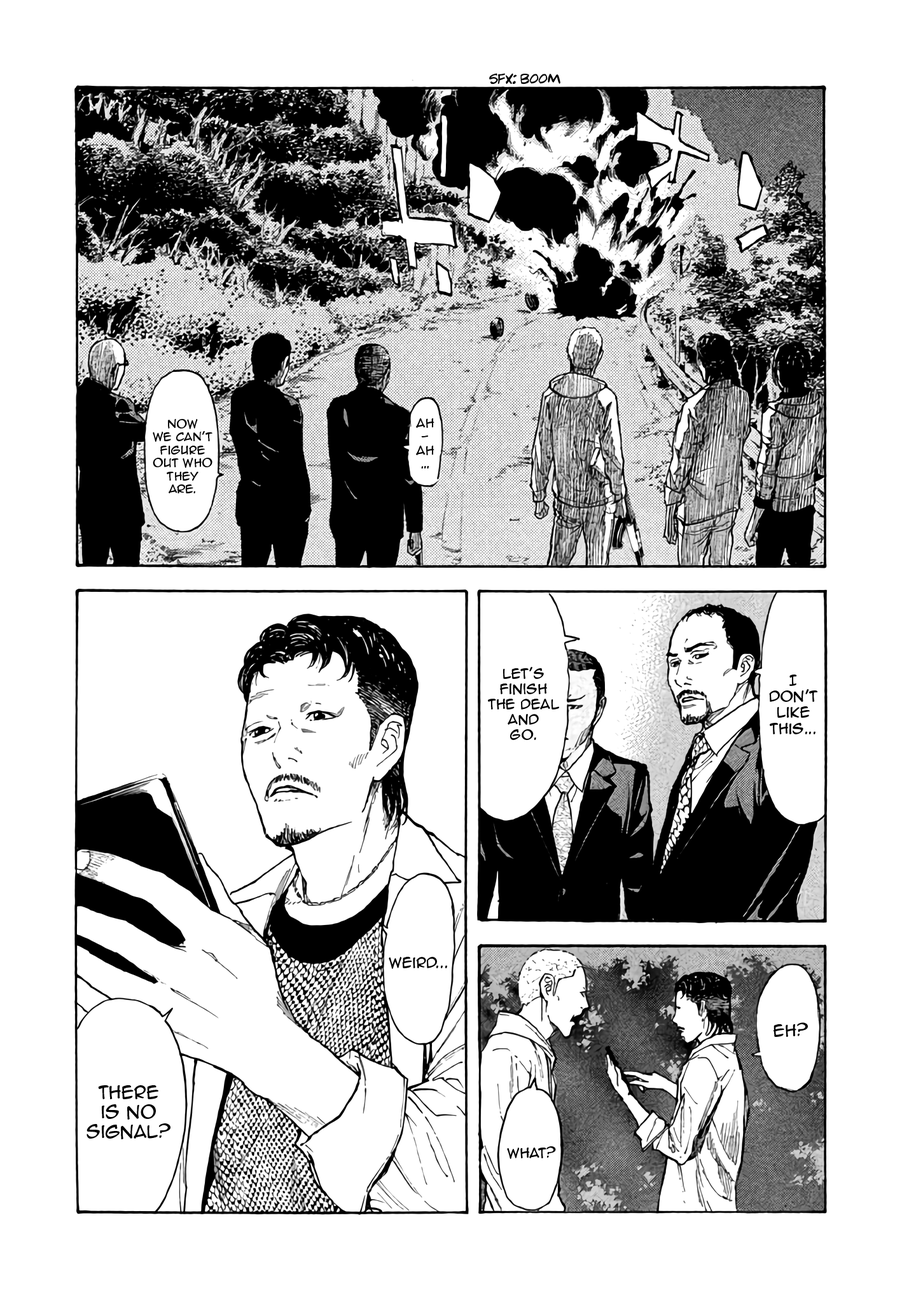
<style>
.page{position:relative;width:916px;height:1302px;background:#ffffff}
.page>*{position:absolute;margin:0}
.t1{font:13.4px "AdamWarrenpro";color:#000000}
.t2{font:10.8px "AnimeAce2.0BB";color:#000000}
.t3{font:11.4px "AnimeAce2.0BB";color:#000000}
.t4{font:12.7px "AnimeAce2.0BB";color:#000000}
.t5{font:13.4px "AnimeAce2.0BB";color:#000000}
.t6{font:15.3px "AnimeAce2.0BB";color:#000000}
.t7{font:16.5px "AnimeAce2.0BB";color:#000000}
</style>
<div class="page">
<p class="t1" style="left:489px;top:73px;width:71px;height:12px">Sfx: boom</p>
<p class="t2" style="left:153px;top:419px;width:59px;height:74px;text-align:center">Now<br>we can’t<br>figure<br>out who<br>they<br>are.</p>
<p class="t3" style="left:416px;top:418px;width:18px;height:51px;text-align:center">Ah<br>-<br>ah<br>…</p>
<p class="t4" style="left:488px;top:667px;width:71px;height:73px;text-align:center">Let’s<br>finish<br>the deal<br>and<br>go.</p>
<p class="t5" style="left:769px;top:675px;width:49px;height:59px;text-align:center">I<br>don’t<br>like<br>this...</p>
<p class="t5" style="left:389px;top:957px;width:58px;height:12px">weird...</p>
<p class="t6" style="left:773px;top:1022px;width:35px;height:15px">Eh?</p>
<p class="t7" style="left:86px;top:1085px;width:84px;height:54px;text-align:center">There<br>is no<br>signal?</p>
<p class="t4" style="left:507px;top:1146px;width:49px;height:13px">What?</p>
</div>
